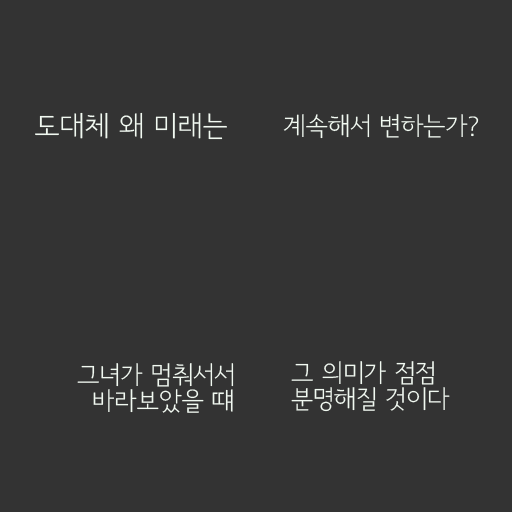
<style>
.page{position:relative;width:512px;height:512px;background:#333333}
.page>*{position:absolute;margin:0}
.t1{font:28px "SeoulNamsanL";color:#f1f9f1}
.t2{font:25px "SeoulNamsanL";color:#f1f9f1}
.t3{font:25px/26px "SeoulNamsanL";color:#f1f9f1}
</style>
<div class="page">
<p class="t1" style="left:35px;top:112px;width:192px;height:28px">도대체 왜 미래는</p>
<p class="t2" style="left:283px;top:114px;width:196px;height:25px">계속해서 변하는가?</p>
<p class="t3" style="left:77px;top:363px;width:157px;height:50px;text-align:right">그녀가 멈춰서서<br>바라보았을 떄</p>
<p class="t3" style="left:291px;top:361px;width:159px;height:51px">그 의미가 점점<br>분명해질 것이다</p>
</div>
